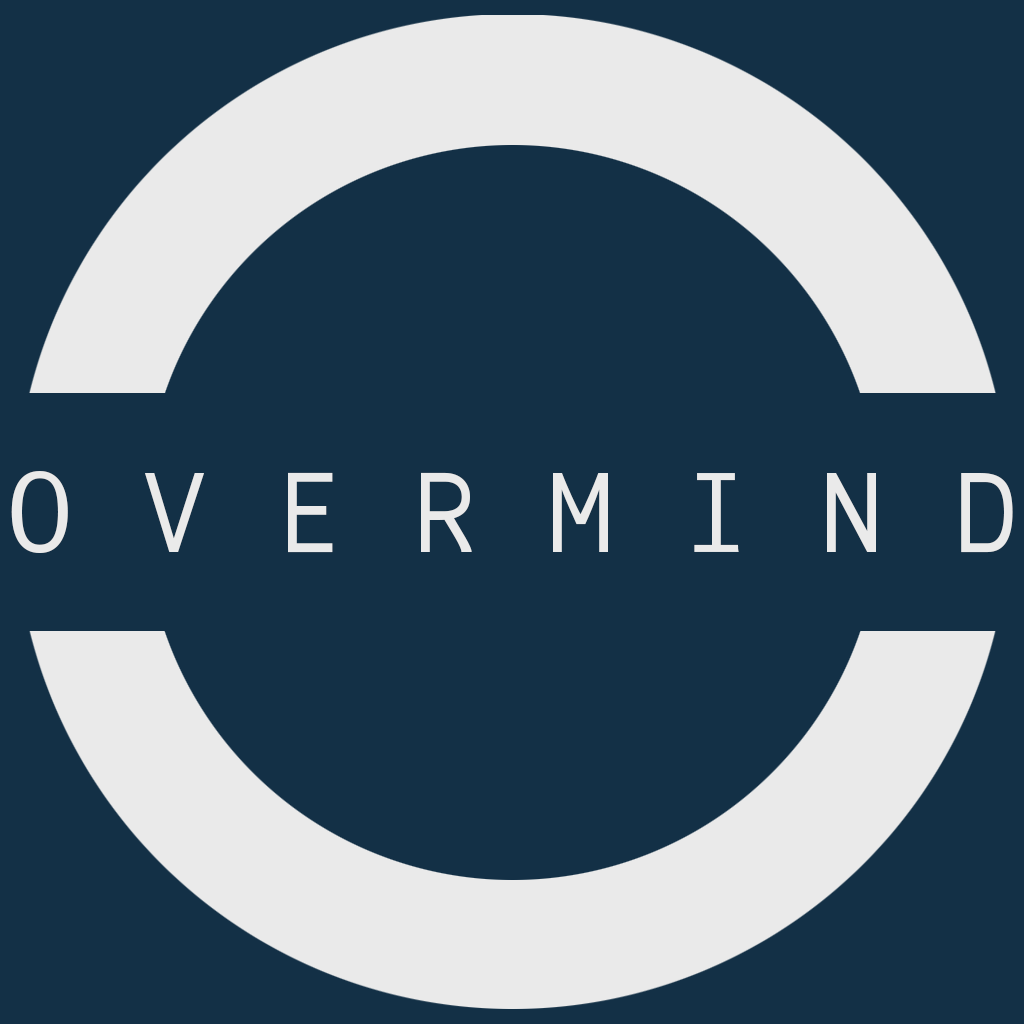
<style>
.page{position:relative;width:1024px;height:1024px;background:#133046}
.page>*{position:absolute;margin:0}
.t1{font:121.9px "DankMono-Regular";letter-spacing:0.56em;color:#eaeaea}
</style>
<div class="page">
<p class="t1" style="left:11px;top:471px;width:1002px;height:82px">OVERMIND</p>
</div>
